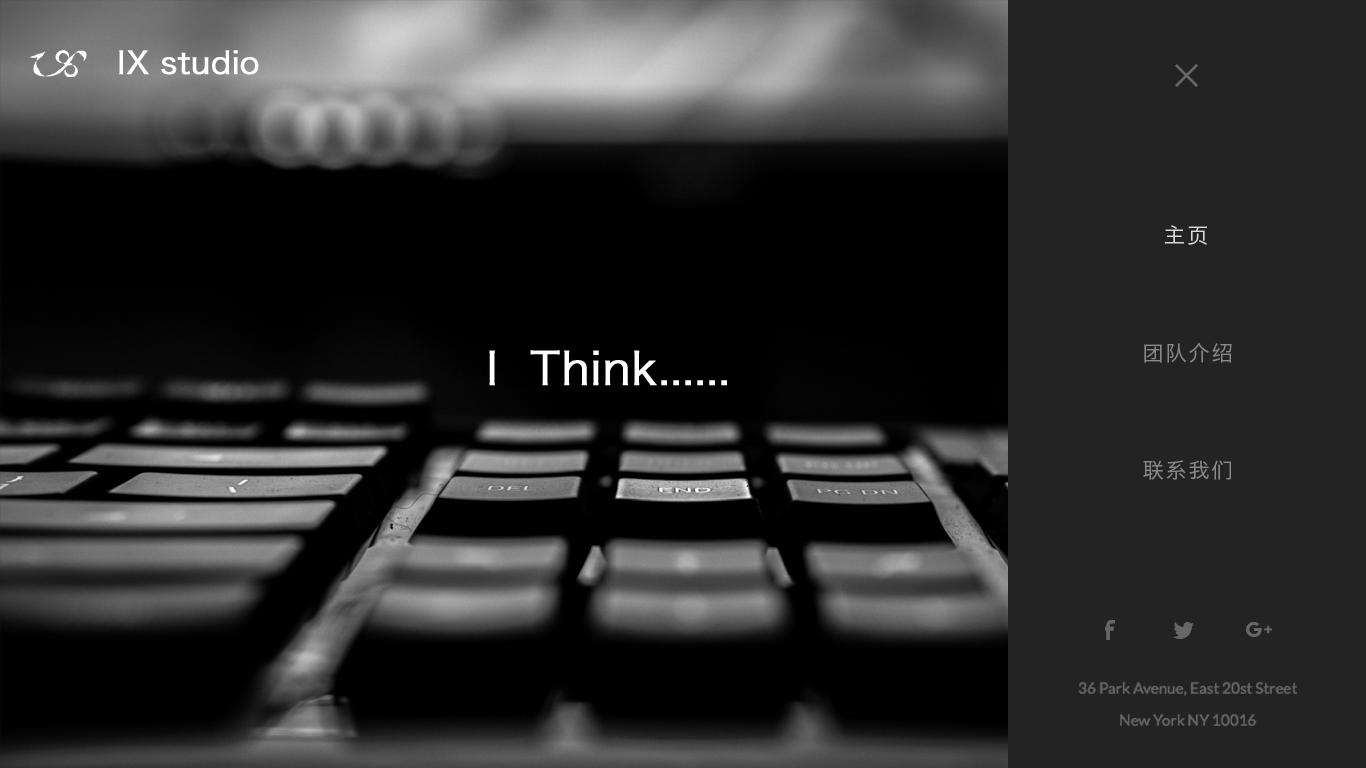
<style>
.page{position:relative;width:1366px;height:768px;background:#000000}
.page>*{position:absolute;margin:0}
.t1{font:30.9px "HiraginoSansGB-W3";color:#ffffff;font-weight:bold}
.t2{font:21px "HiraginoSansGB-W3";letter-spacing:0.1em;color:#d9d9d9}
.t3{font:45px "HiraginoSansGB-W3";color:#ffffff;font-weight:bold}
.t4{font:21px "HiraginoSansGB-W3";letter-spacing:0.1em;color:#89898a}
.t5{font:15.4px/32px "Lato-Regular";color:#666666}
</style>
<div class="page">
<p class="t1" style="left:119px;top:50px;width:140px;height:25px">IX studio</p>
<p class="t2" style="left:1164px;top:225px;width:43px;height:20px">主页</p>
<p class="t3" style="left:489px;top:350px;width:238px;height:36px">I  Think......</p>
<p class="t4" style="left:1144px;top:343px;width:88px;height:20px">团队介绍</p>
<p class="t4" style="left:1143px;top:460px;width:88px;height:20px">联系我们</p>
<p class="t5" style="left:1078px;top:681px;width:219px;height:46px;text-align:center">36 Park Avenue, East 20st Street<br>New York NY 10016</p>
</div>
